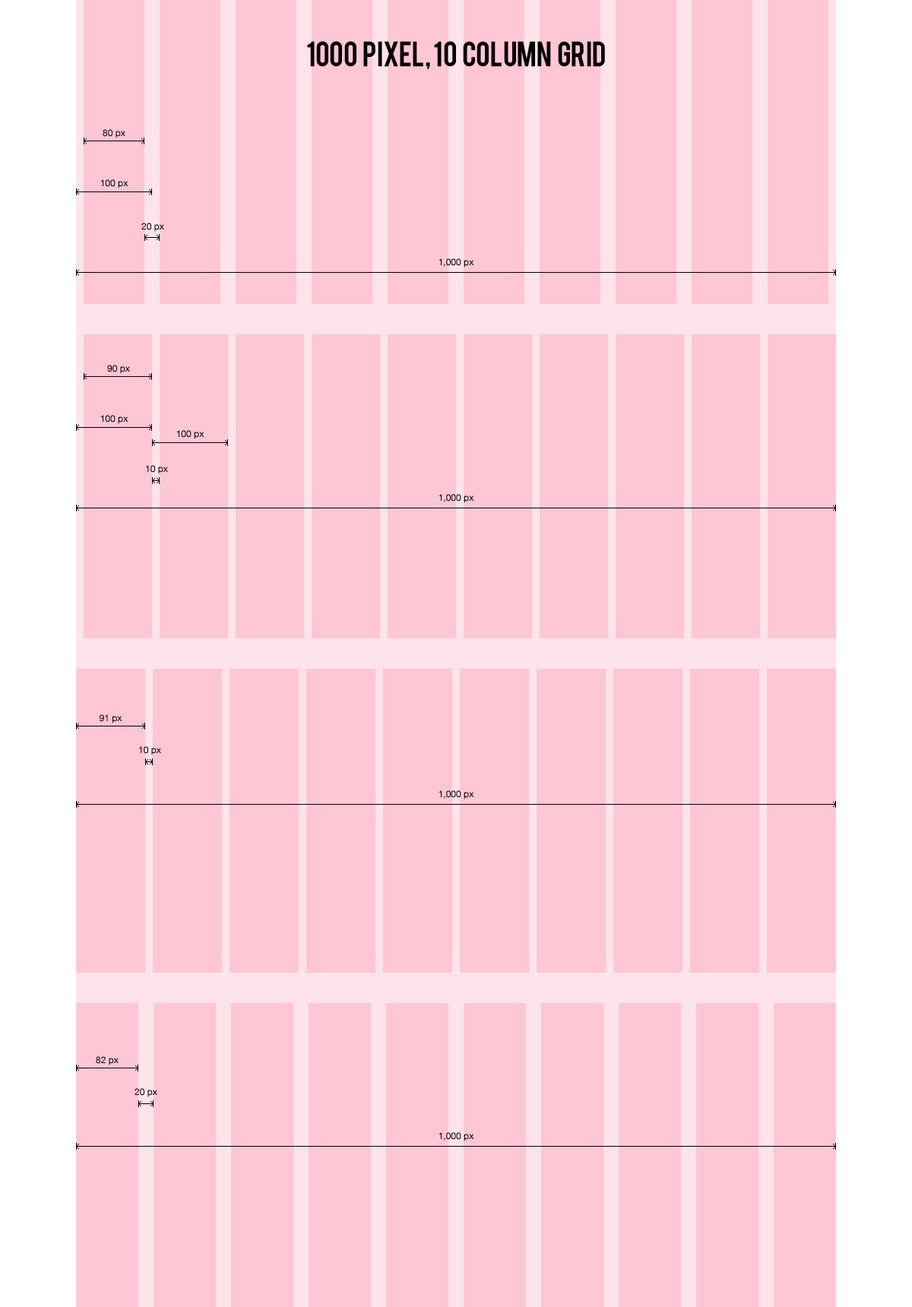
<style>
.page{position:relative;width:912px;height:1307px;background:#ffc6d5}
.page>*{position:absolute;margin:0}
.t1{font:27.4px "Bebas";color:#000000}
.t2{font:9.1px "HelveticaNeue";color:#000000}
</style>
<div class="page">
<p class="t1" style="left:307px;top:41px;width:298px;height:28px">1000  pixel, 10  column  grid</p>
<p class="t2" style="left:103px;top:129px;width:22px;height:9px">80 px</p>
<p class="t2" style="left:100px;top:179px;width:28px;height:10px">100 px</p>
<p class="t2" style="left:141px;top:223px;width:23px;height:9px">20 px</p>
<p class="t2" style="left:439px;top:258px;width:35px;height:10px">1,000 px</p>
<p class="t2" style="left:107px;top:365px;width:23px;height:9px">90 px</p>
<p class="t2" style="left:100px;top:415px;width:28px;height:9px">100 px</p>
<p class="t2" style="left:176px;top:430px;width:28px;height:9px">100 px</p>
<p class="t2" style="left:146px;top:465px;width:22px;height:9px">10 px</p>
<p class="t2" style="left:439px;top:494px;width:35px;height:9px">1,000 px</p>
<p class="t2" style="left:100px;top:714px;width:22px;height:10px">91 px</p>
<p class="t2" style="left:139px;top:746px;width:22px;height:10px">10 px</p>
<p class="t2" style="left:439px;top:790px;width:35px;height:10px">1,000 px</p>
<p class="t2" style="left:96px;top:1057px;width:23px;height:9px">82 px</p>
<p class="t2" style="left:135px;top:1088px;width:22px;height:10px">20 px</p>
<p class="t2" style="left:439px;top:1133px;width:35px;height:9px">1,000 px</p>
</div>
